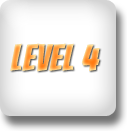
<style>
.page{position:relative;width:127px;height:131px}
.page>*{position:absolute;margin:0}
.t1{font:37px "Bangers-Regular";letter-spacing:0.01em}
</style>
<div class="page">
<p class="t1" style="left:10px;top:43px;width:90px;height:29px">LEVEL 4</p>
</div>
